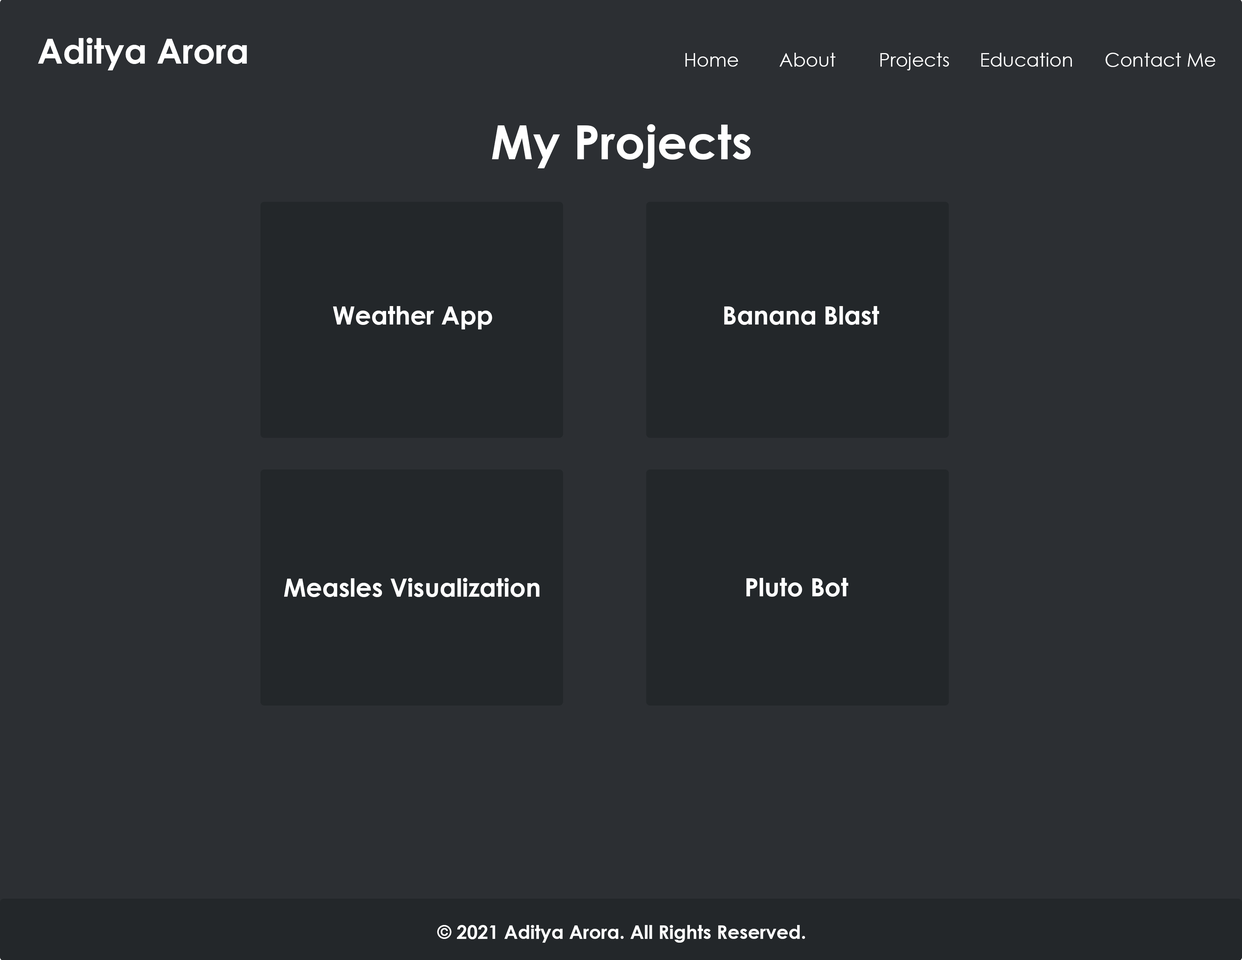
<style>
.page{position:relative;width:1242px;height:960px;background:#2c2f33}
.page>*{position:absolute;margin:0}
.t1{font:34.5px "CenturyGothic-Bold";color:#ffffff}
.t2{font:18.8px "CenturyGothic";color:#ffffff}
.t3{font:47.1px "CenturyGothic-Bold";color:#ffffff}
.t4{font:25.1px "CenturyGothic-Bold";color:#ffffff}
.t5{font:18.8px "CenturyGothic-Bold";color:#ffffff}
</style>
<div class="page">
<p class="t1" style="left:38px;top:38px;width:209px;height:32px">Aditya Arora</p>
<p class="t2" style="left:685px;top:53px;width:53px;height:14px">Home</p>
<p class="t2" style="left:780px;top:53px;width:56px;height:14px">About</p>
<p class="t2" style="left:880px;top:53px;width:69px;height:17px">Projects</p>
<p class="t2" style="left:981px;top:53px;width:91px;height:14px">Education</p>
<p class="t2" style="left:1106px;top:53px;width:110px;height:14px">Contact Me</p>
<p class="t3" style="left:492px;top:124px;width:259px;height:45px">My Projects</p>
<p class="t4" style="left:333px;top:306px;width:159px;height:23px">Weather App</p>
<p class="t4" style="left:724px;top:306px;width:155px;height:19px">Banana Blast</p>
<p class="t4" style="left:284px;top:578px;width:256px;height:19px">Measles Visualization</p>
<p class="t4" style="left:746px;top:578px;width:102px;height:19px">Pluto Bot</p>
<p class="t5" style="left:437px;top:925px;width:368px;height:18px">© 2021 Aditya Arora. All Rights Reserved.</p>
</div>
